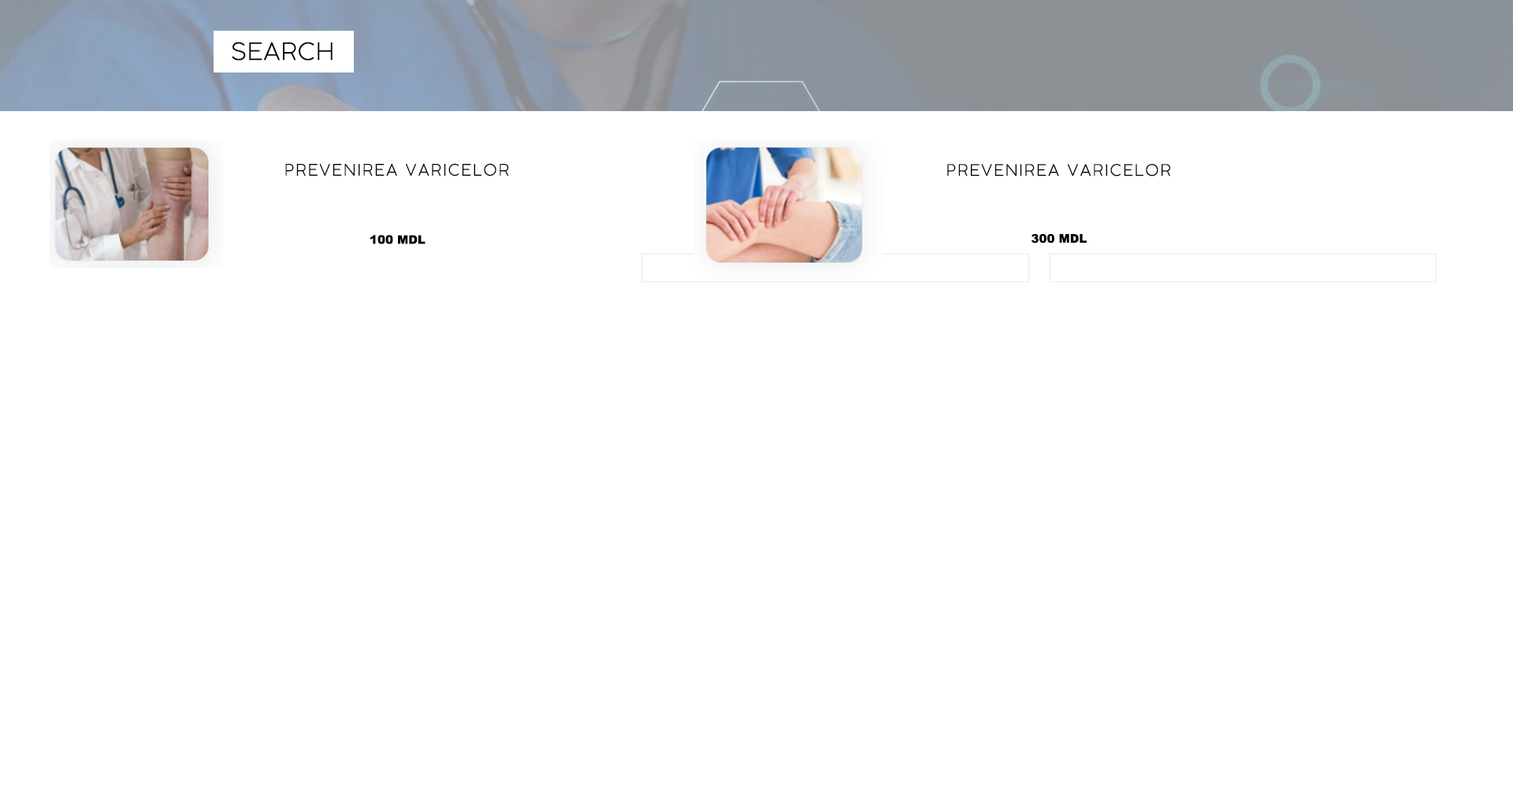
<style>
.page{position:relative;width:1513px;height:788px;background:#ffffff}
.page>*{position:absolute;margin:0}
.t1{font:23.7px "COCOGOOSE-UltraLight";letter-spacing:0.025em;color:#000000}
.t2{font:15.8px "COCOGOOSE-UltraLight";letter-spacing:0.1em;color:#000000}
.t3{font:11.8px "Arial-Black";color:#000000}
</style>
<div class="page">
<p class="t1" style="left:232px;top:42px;width:101px;height:19px">SEARCH</p>
<p class="t2" style="left:285px;top:163px;width:224px;height:14px">PREVENIREA VARICELOR</p>
<p class="t2" style="left:947px;top:164px;width:223px;height:13px">PREVENIREA VARICELOR</p>
<p class="t3" style="left:370px;top:235px;width:56px;height:9px">100 MDL</p>
<p class="t3" style="left:1031px;top:234px;width:56px;height:10px">300 MDL</p>
</div>
